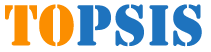
<style>
.page{position:relative;width:211px;height:52px;background:#ffffff}
.page>*{position:absolute;margin:0}
.t1{font:53.2px "StencilStd";color:#1e73be;font-weight:bold;scale:0.96 1}
.t2{font:53.2px "StencilStd";color:#fb8e00;font-weight:bold;scale:0.96 1}
</style>
<div class="page">
<p class="t1" style="left:5px;top:4px;width:197px;height:43px"><span class="t2">TO</span>PSIS</p>
</div>
